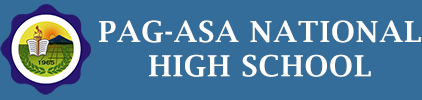
<style>
.page{position:relative;width:422px;height:100px;background:#346c9a}
.page>*{position:absolute;margin:0}
.t1{font:28.9px/34.2px "LucidaBright-Demi";letter-spacing:0.042em;color:#ffffff}
</style>
<div class="page">
<p class="t1" style="left:99px;top:20px;width:322px;height:57px;text-align:center">PAG-ASA NATIONAL<br>HIGH SCHOOL</p>
</div>
